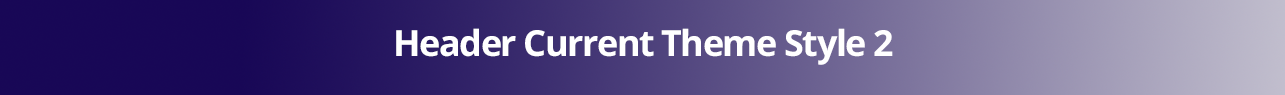
<style>
.page{position:relative;width:1285px;height:95px}
.page>*{position:absolute;margin:0}
.t1{font:36px "OpenSans-Bold";letter-spacing:-0.04em;color:#ffffff}
</style>
<div class="page">
<p class="t1" style="left:396px;top:28px;width:497px;height:37px">Header Current Theme Style 2</p>
</div>
